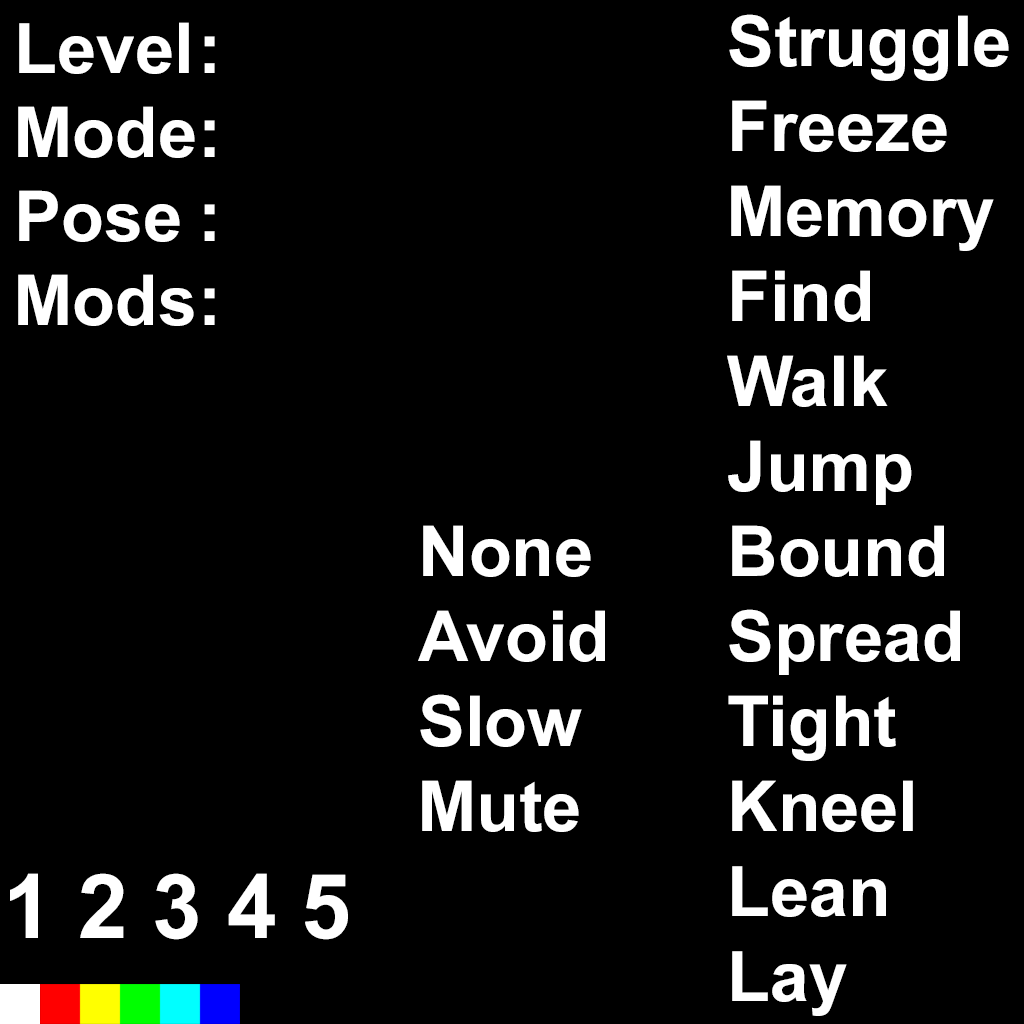
<style>
.page{position:relative;width:1024px;height:1024px;background:#000000}
.page>*{position:absolute;margin:0}
.t1{font:70px/85px "Arial-BoldMT";color:#ffffff}
.t2{font:70px "Arial-BoldMT";color:#ffffff}
.t3{font:89.2px "Arial-BoldMT";color:#ffffff}
</style>
<div class="page">
<p class="t1" style="left:727px;top:14px;width:282px;height:1002px">Struggle<br>Freeze<br>Memory<br>Find<br>Walk<br>Jump<br>Bound<br>Spread<br>Tight<br>Kneel<br>Lean<br>Lay</p>
<p class="t2" style="left:18px;top:22px;width:177px;height:304px">Level<br>Mode<br>Pose<br>Mods</p>
<p class="t2" style="left:204px;top:36px;width:11px;height:289px">:<br>:<br>:<br>:</p>
<p class="t1" style="left:418px;top:525px;width:187px;height:307px">None<br>Avoid<br>Slow<br>Mute</p>
<p class="t3" style="left:10px;top:873px;width:338px;height:67px">1 2 3 4 5</p>
</div>
